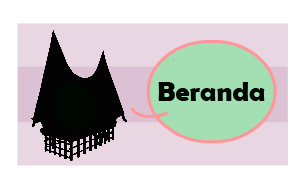
<style>
.page{position:relative;width:307px;height:183px;background:#ffffff}
.page>*{position:absolute;margin:0}
.t1{font:28px "BerlinSansFBDemi-Bold";color:#000602}
</style>
<div class="page">
<p class="t1" style="left:158px;top:82px;width:107px;height:19px">Beranda</p>
</div>
